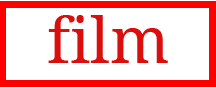
<style>
.page{position:relative;width:216px;height:88px;background:#ffffff}
.page>*{position:absolute;margin:0}
.t1{font:62.5px "NotoSerif";color:#db0e0e}
</style>
<div class="page">
<p class="t1" style="left:48px;top:15px;width:120px;height:48px">film</p>
</div>
